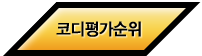
<style>
.page{position:relative;width:202px;height:56px;background:#ffffff}
.page>*{position:absolute;margin:0}
.t1{font:17px "YDIYGO330";letter-spacing:-0.025em;color:#000000;font-weight:bold;scale:0.91 1}
</style>
<div class="page">
<p class="t1" style="left:56px;top:21px;width:85px;height:16px">코디평가순위</p>
</div>
